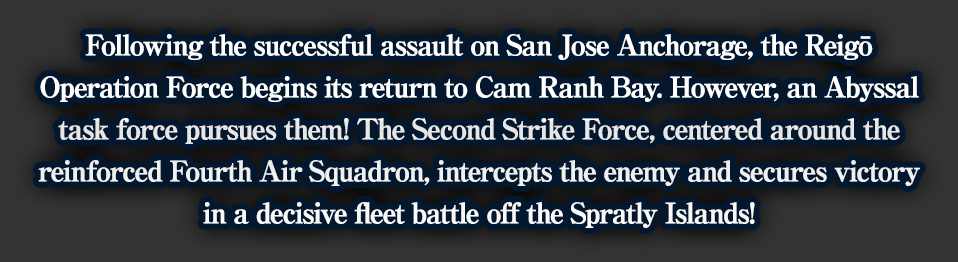
<style>
.page{position:relative;width:958px;height:262px;background:#03172f}
.page>*{position:absolute;margin:0}
.t1{font:28px/42px "RyuminPro-ExBold";letter-spacing:-0.08em;color:#ffffff;font-weight:bold}
</style>
<div class="page">
<p class="t1" style="left:38px;top:34px;width:882px;height:194px;text-align:center">Following the successful assault on San Jose Anchorage, the Reigō<br>Operation Force begins its return to Cam Ranh Bay. However, an Abyssal<br>task force pursues them! The Second Strike Force, centered around the<br>reinforced Fourth Air Squadron, intercepts the enemy and secures victory<br>in a decisive fleet battle off the Spratly Islands!</p>
</div>
